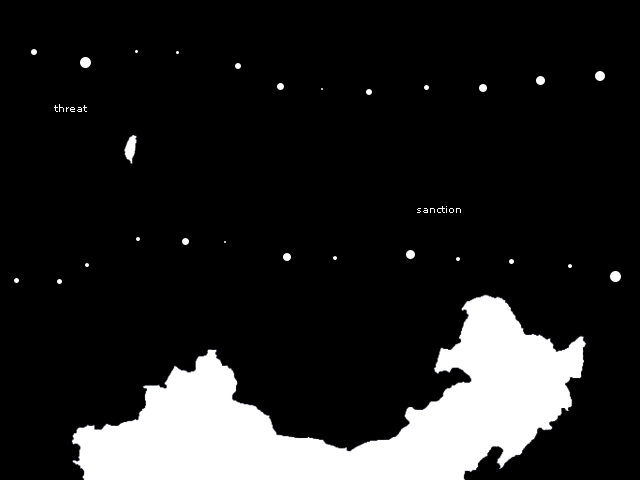
<style>
.page{position:relative;width:640px;height:480px;background:#000000}
.page>*{position:absolute;margin:0}
.t1{font:10px "Verdana";color:#ffffff}
</style>
<div class="page">
<p class="t1" style="left:54px;top:104px;width:33px;height:8px">threat</p>
<p class="t1" style="left:417px;top:206px;width:44px;height:7px">sanction</p>
</div>
